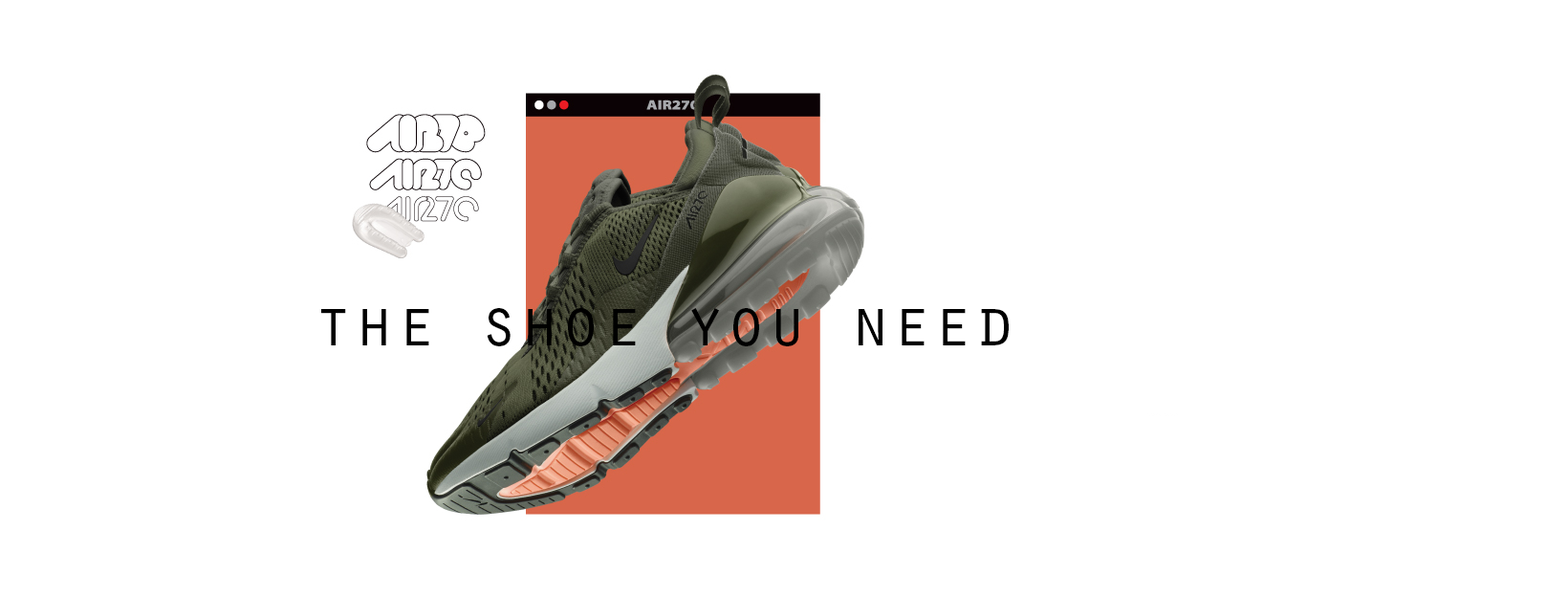
<style>
.page{position:relative;width:1568px;height:597px;background:#ffffff}
.page>*{position:absolute;margin:0}
.t1{font:68.8px "OratorStd";color:#000000}
</style>
<div class="page">
<p class="t1" style="left:321px;top:308px;width:688px;height:38px">the shoe you need</p>
</div>
